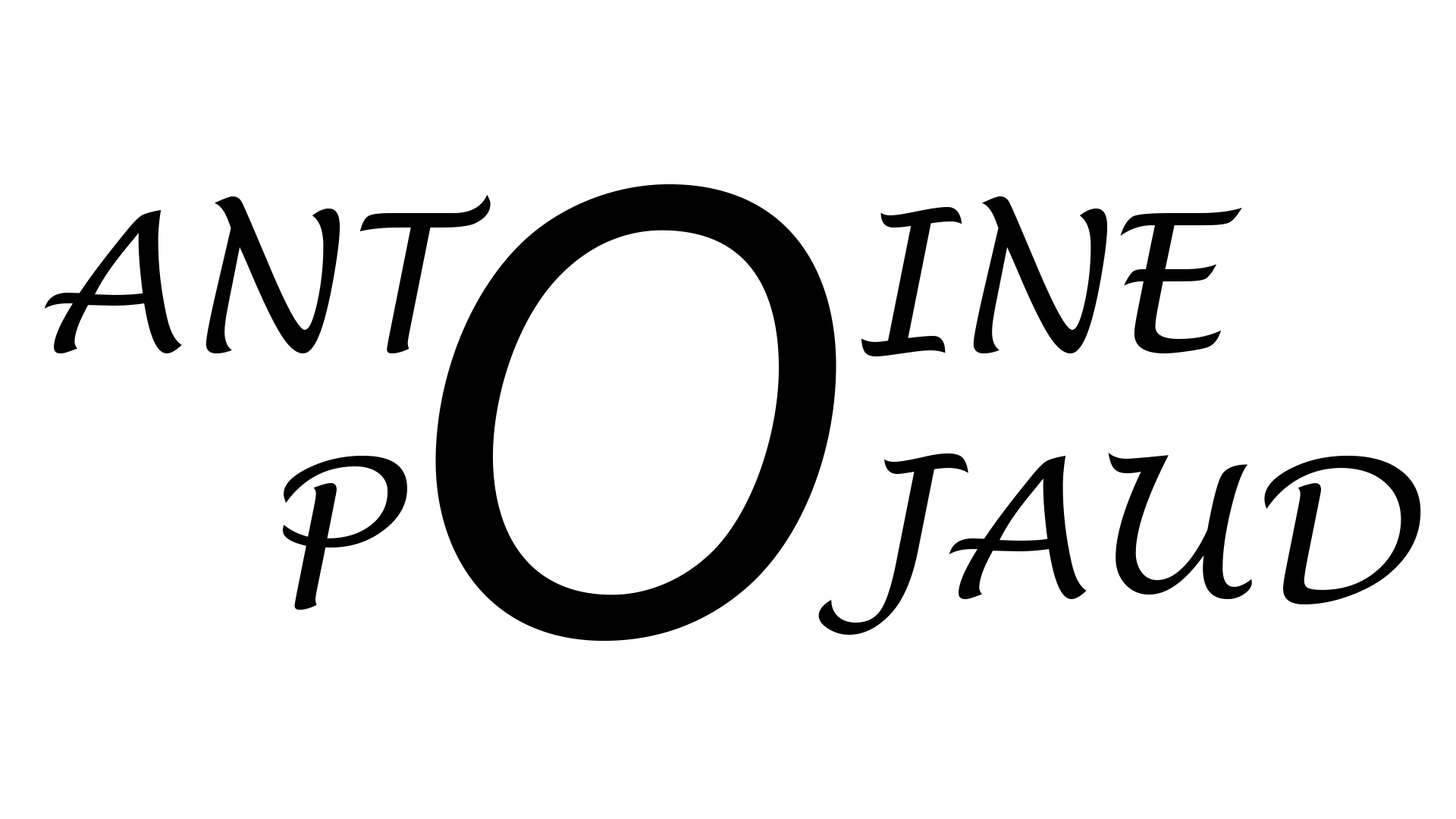
<style>
.page{position:relative;width:1456px;height:819px;background:#ffffff}
.page>*{position:absolute;margin:0}
.t1{font:657.2px "MyriadPro-It";color:#000000}
.t2{font:189.6px "LucidaHandwriting-Italic";color:#000000}
</style>
<div class="page">
<p class="t1" style="left:435px;top:184px;width:401px;height:458px">O</p>
<p class="t2" style="left:44px;top:195px;width:1198px;height:161px">ANT      INE</p>
<p class="t2" style="left:282px;top:453px;width:1139px;height:182px">P       JAUD</p>
</div>
